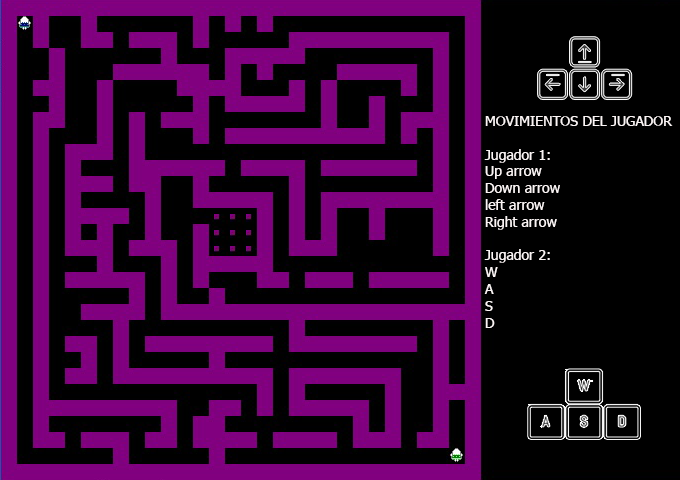
<style>
.page{position:relative;width:680px;height:480px;background:#000000}
.page>*{position:absolute;margin:0}
.t1{font:14px "Tahoma";color:#fbf5f5}
</style>
<div class="page">
<p class="t1" style="left:484px;top:116px;width:189px;height:212px">MOVIMIENTOS DEL JUGADOR<br><br>Jugador 1:<br>Up arrow<br>Down arrow<br>left arrow<br>Right arrow<br><br>Jugador 2:<br>W<br>A<br>S<br>D</p>
</div>
